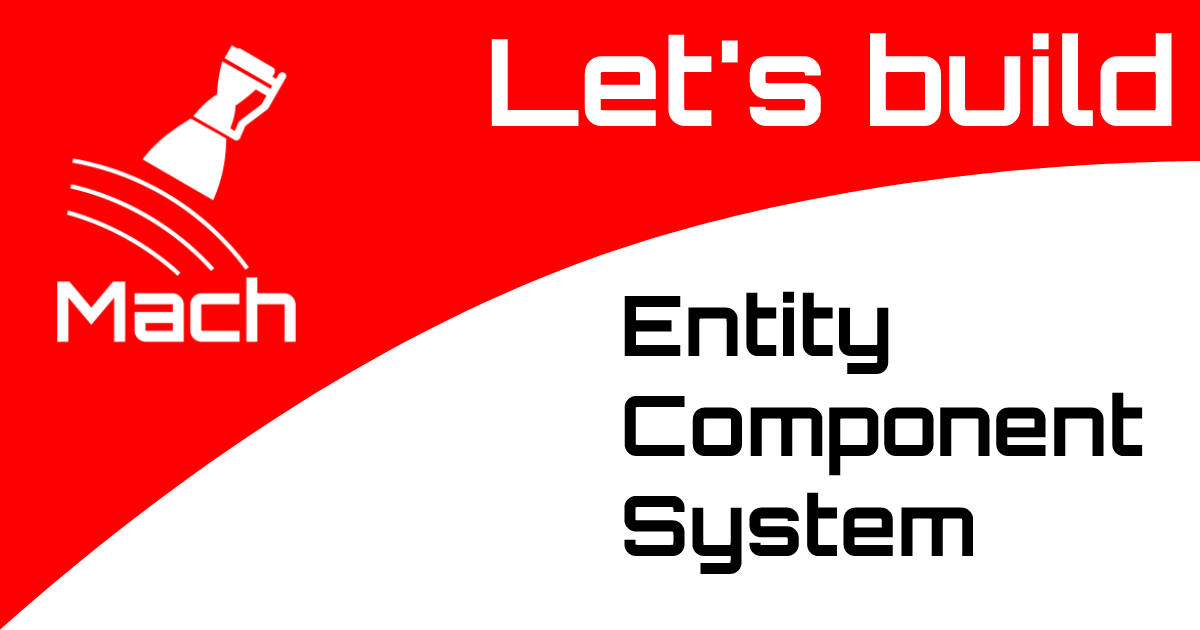
<style>
.page{position:relative;width:1200px;height:630px;background:#ffffff}
.page>*{position:absolute;margin:0}
.t1{font:120.4px "Orbitron-Bold";color:#ffffff}
.t2{font:83.4px "Orbitron-Bold";color:#000000}
</style>
<div class="page">
<p class="t1" style="left:491px;top:33px;width:681px;height:93px">Let's build</p>
<p class="t2" style="left:624px;top:291px;width:519px;height:283px">Entity<br>Component<br>System</p>
</div>
